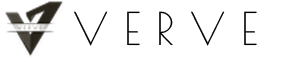
<style>
.page{position:relative;width:290px;height:58px;background:#ffffff}
.page>*{position:absolute;margin:0}
.t1{font:44.3px "PoiretOne-Regular";color:#000000}
</style>
<div class="page">
<p class="t1" style="left:74px;top:11px;width:183px;height:35px">V E R V E</p>
</div>
